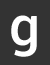
<style>
.page{position:relative;width:50px;height:65px;background:#333333}
.page>*{position:absolute;margin:0}
.t1{font:55px "Roboto-Medium";letter-spacing:0.05em;color:#ffffff}
</style>
<div class="page">
<p class="t1" style="left:11px;top:15px;width:26px;height:42px">g</p>
</div>
